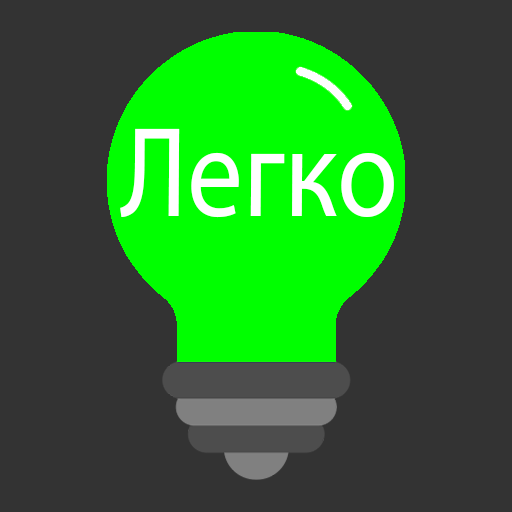
<style>
.page{position:relative;width:512px;height:512px;background:#333333}
.page>*{position:absolute;margin:0}
.t1{font:129px "MyriadPro-Regular";color:#ffffff;scale:0.86 1}
</style>
<div class="page">
<p class="t1" style="left:120px;top:128px;width:274px;height:90px">Легко</p>
</div>
